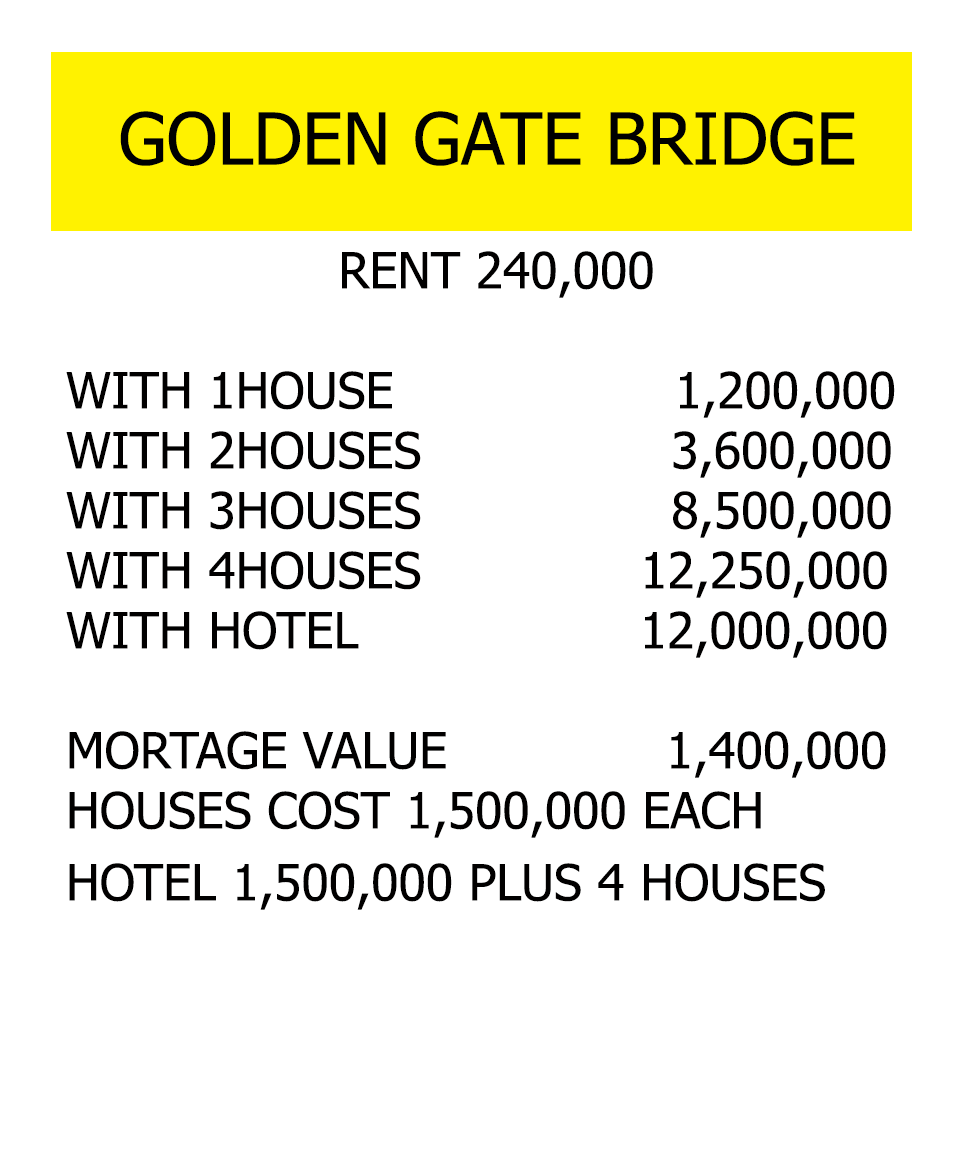
<style>
.page{position:relative;width:966px;height:1164px;background:#ffffff}
.page>*{position:absolute;margin:0}
.t1{font:72px "Tahoma";color:#000000}
.t2{font:50px "Tahoma";color:#010000}
</style>
<div class="page">
<p class="t1" style="left:120px;top:111px;width:735px;height:55px">GOLDEN GATE BRIDGE</p>
<p class="t2" style="left:66px;top:251px;width:829px;height:659px;text-align:center">RENT 240,000<br><br>WITH 1HOUSE                  1,200,000<br>WITH 2HOUSES                3,600,000<br>WITH 3HOUSES                8,500,000<br>WITH 4HOUSES              12,250,000<br>WITH HOTEL                  12,000,000<br><br>MORTAGE VALUE              1,400,000<br>HOUSES COST 1,500,000 EACH<br>HOTEL 1,500,000 PLUS 4 HOUSES</p>
</div>
